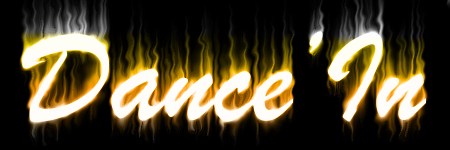
<style>
.page{position:relative;width:450px;height:150px;background:#000000}
.page>*{position:absolute;margin:0}
.t1{font:133.3px "BrushScriptMT";color:#fdfdfb}
</style>
<div class="page">
<p class="t1" style="left:22px;top:31px;width:404px;height:91px">Dance’In</p>
</div>
